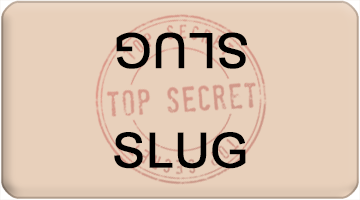
<style>
.page{position:relative;width:360px;height:200px;background:#e8d0bb}
.page>*{position:absolute;margin:0}
.t1{font:48px "ArialMT";color:#000000;font-weight:bold}
</style>
<div class="page">
<p class="t1" style="left:116px;top:32px;width:131px;height:37px;rotate:180deg">SLUG</p>
<p class="t1" style="left:114px;top:132px;width:132px;height:37px">SLUG</p>
</div>
